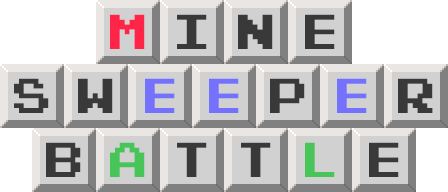
<style>
.page{position:relative;width:448px;height:192px;background:#d1d1d1}
.page>*{position:absolute;margin:0}
.t1{font:50px "PixelNES";color:#ff2549}
.t2{font:50px "PixelNES";color:#393939}
.t3{font:50px "PixelNES";color:#7471fd}
.t4{font:50px "PixelNES";color:#48c559}
</style>
<div class="page">
<p class="t1" style="left:110px;top:14px;width:35px;height:35px">M</p>
<p class="t2" style="left:177px;top:14px;width:30px;height:35px">I</p>
<p class="t2" style="left:238px;top:14px;width:35px;height:35px">N</p>
<p class="t2" style="left:305px;top:14px;width:30px;height:35px">E</p>
<p class="t2" style="left:14px;top:78px;width:35px;height:35px">S</p>
<p class="t2" style="left:78px;top:78px;width:35px;height:35px">W</p>
<p class="t3" style="left:145px;top:78px;width:30px;height:35px">E</p>
<p class="t3" style="left:209px;top:78px;width:30px;height:35px">E</p>
<p class="t2" style="left:270px;top:78px;width:35px;height:35px">P</p>
<p class="t3" style="left:337px;top:78px;width:30px;height:35px">E</p>
<p class="t2" style="left:398px;top:78px;width:35px;height:35px">R</p>
<p class="t2" style="left:46px;top:142px;width:35px;height:35px">B</p>
<p class="t4" style="left:110px;top:142px;width:35px;height:35px">A</p>
<p class="t2" style="left:177px;top:142px;width:30px;height:35px">T</p>
<p class="t2" style="left:241px;top:142px;width:30px;height:35px">T</p>
<p class="t4" style="left:305px;top:142px;width:30px;height:35px">L</p>
<p class="t2" style="left:369px;top:142px;width:30px;height:35px">E</p>
</div>
